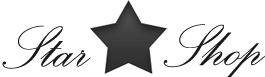
<style>
.page{position:relative;width:265px;height:77px;background:#ffffff}
.page>*{position:absolute;margin:0}
.t1{font:75.5px "PalaceScriptMT";color:#191919}
</style>
<div class="page">
<p class="t1" style="left:2px;top:25px;width:89px;height:44px">Star</p>
<p class="t1" style="left:163px;top:24px;width:102px;height:53px">Shop</p>
</div>
